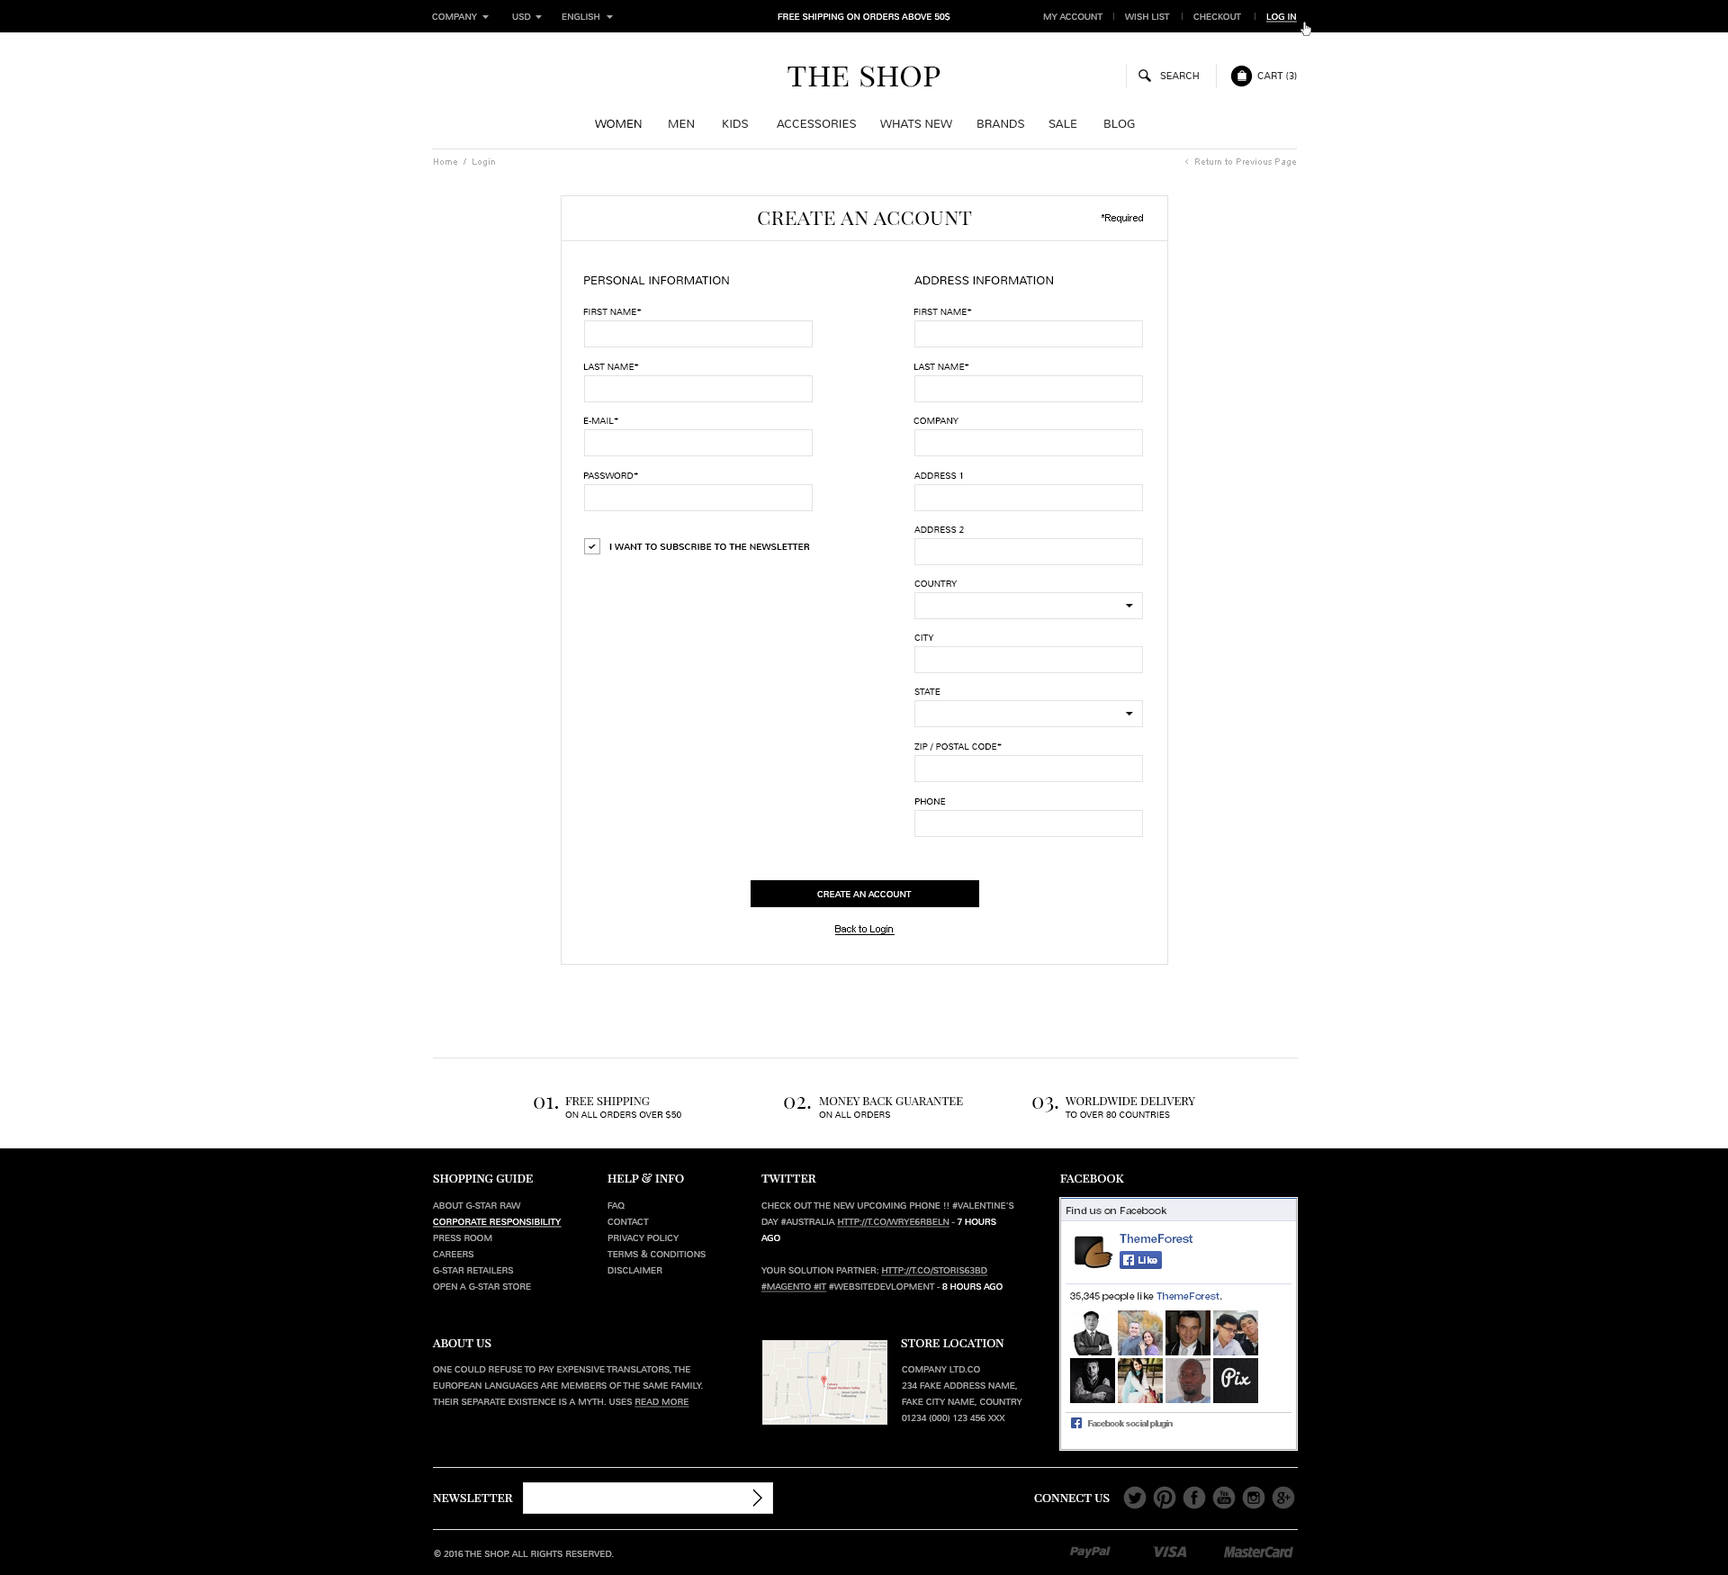
<style>
.page{position:relative;width:1728px;height:1575px;background:#ffffff}
.page>*{position:absolute;margin:0}
.t1{font:9px "Nunito-Light";color:#aaaaaa;text-transform:uppercase}
.t2{font:9px "Nunito-Light";color:#ffffff;text-transform:uppercase}
.t3{font:9px "Nunito-Light";color:#ffffff;text-transform:uppercase;text-decoration:underline}
.t4{font:32.4px "PlayfairDisplaySC-Regular";color:#000000}
.t5{font:9.9px "Nunito-Light";color:#282828;text-transform:uppercase}
.t6{font:11.7px "Nunito-Light";color:#000000;text-transform:uppercase}
.t7{font:11.7px "Nunito-Light";color:#282828;text-transform:uppercase}
.t8{font:9px "ArialMT";color:#aaaaaa}
.t9{font:10.8px "Cabin-Regular";color:#aaaaaa}
.t10{font:21.6px "PlayfairDisplaySC-Regular";color:#000000}
.t11{font:9.9px "ArialMT";color:#000000}
.t12{font:9px "Nunito-Light";color:#000000;text-transform:uppercase}
.t13{font:9px "Nunito-Regular";color:#000000;text-transform:uppercase}
.t14{font:9.9px "ArialMT";color:#000000;text-decoration:underline}
.t15{font:11.7px "PlayfairDisplaySC-Regular";color:#000000;text-transform:uppercase}
.t16{font:12.6px "PlayfairDisplaySC-Regular";color:#ffffff}
.t17{font:9px/16.2px "Nunito-Light";color:#aaaaaa;text-transform:uppercase}
.t18{font:9px/16.2px "Nunito-Light";color:#ffffff;text-transform:uppercase;text-decoration:underline}
.t19{font:9px/16.2px "Nunito-Light";color:#aaaaaa;text-transform:uppercase;text-decoration:underline}
.t20{font:9px/16.2px "Nunito-Light";color:#ffffff;text-transform:uppercase}
</style>
<div class="page">
<p class="t1" style="left:432px;top:14px;width:45px;height:6px">company</p>
<p class="t1" style="left:512px;top:14px;width:19px;height:6px">usD</p>
<p class="t1" style="left:562px;top:14px;width:37px;height:6px">English</p>
<p class="t2" style="left:778px;top:13px;width:172px;height:8px">free shipping on orders above 50$</p>
<p class="t1" style="left:1043px;top:14px;width:60px;height:6px">my account</p>
<p class="t1" style="left:1125px;top:14px;width:45px;height:6px">wish list</p>
<p class="t1" style="left:1193px;top:14px;width:48px;height:6px">Checkout</p>
<p class="t3" style="left:1266px;top:14px;width:31px;height:8px">log in</p>
<p class="t4" style="left:788px;top:66px;width:152px;height:21px">the shop</p>
<p class="t5" style="left:1160px;top:72px;width:39px;height:7px">search</p>
<p class="t5" style="left:1257px;top:72px;width:40px;height:8px">Cart (3)</p>
<p class="t6" style="left:595px;top:120px;width:47px;height:8px">women</p>
<p class="t7" style="left:669px;top:120px;width:25px;height:8px">men</p>
<p class="t7" style="left:723px;top:120px;width:25px;height:8px">kids</p>
<p class="t7" style="left:777px;top:120px;width:79px;height:8px">accessories</p>
<p class="t7" style="left:880px;top:120px;width:72px;height:8px">whats new</p>
<p class="t7" style="left:977px;top:120px;width:47px;height:8px">brands</p>
<p class="t7" style="left:1048px;top:120px;width:29px;height:8px">sale</p>
<p class="t7" style="left:1104px;top:120px;width:31px;height:8px">blog</p>
<p class="t8" style="left:434px;top:158px;width:61px;height:8px">Home  /  Login</p>
<p class="t9" style="left:1185px;top:159px;width:3px;height:5px">&lt;</p>
<p class="t8" style="left:1195px;top:158px;width:101px;height:8px">Return to Previous Page</p>
<p class="t10" style="left:758px;top:212px;width:214px;height:13px">create an account</p>
<p class="t11" style="left:1102px;top:214px;width:41px;height:9px">*Required</p>
<p class="t6" style="left:584px;top:276px;width:145px;height:8px">personal information</p>
<p class="t6" style="left:914px;top:276px;width:139px;height:8px">address information</p>
<p class="t12" style="left:583px;top:309px;width:59px;height:6px">first name*</p>
<p class="t12" style="left:914px;top:309px;width:58px;height:6px">first name*</p>
<p class="t12" style="left:583px;top:364px;width:56px;height:6px">last name*</p>
<p class="t12" style="left:914px;top:364px;width:55px;height:6px">last name*</p>
<p class="t12" style="left:583px;top:418px;width:35px;height:6px">e-mail*</p>
<p class="t12" style="left:914px;top:418px;width:44px;height:6px">company</p>
<p class="t12" style="left:583px;top:472px;width:55px;height:7px">password*</p>
<p class="t12" style="left:914px;top:472px;width:49px;height:7px">Address 1</p>
<p class="t12" style="left:914px;top:526px;width:50px;height:7px">address 2</p>
<p class="t13" style="left:609px;top:544px;width:201px;height:6px">I want to subscribe to the newsletter</p>
<p class="t12" style="left:914px;top:580px;width:43px;height:7px">country</p>
<p class="t12" style="left:914px;top:634px;width:20px;height:7px">city</p>
<p class="t12" style="left:914px;top:688px;width:26px;height:7px">state</p>
<p class="t12" style="left:914px;top:743px;width:88px;height:8px">zip / postal code*</p>
<p class="t12" style="left:914px;top:798px;width:32px;height:7px">Phone</p>
<p class="t2" style="left:817px;top:891px;width:95px;height:6px">create an account</p>
<p class="t14" style="left:835px;top:925px;width:60px;height:10px">Back to Login</p>
<p class="t10" style="left:534px;top:1097px;width:24px;height:12px">01.</p>
<p class="t15" style="left:565px;top:1097px;width:85px;height:8px">Free Shipping</p>
<p class="t10" style="left:784px;top:1097px;width:27px;height:12px">02.</p>
<p class="t15" style="left:819px;top:1097px;width:144px;height:8px">Money back guarantee</p>
<p class="t10" style="left:1032px;top:1097px;width:26px;height:15px">03.</p>
<p class="t15" style="left:1065px;top:1097px;width:130px;height:8px">Worldwide Delivery</p>
<p class="t12" style="left:565px;top:1111px;width:116px;height:8px">On all orders over $50</p>
<p class="t12" style="left:819px;top:1112px;width:72px;height:6px">On all orders</p>
<p class="t12" style="left:1066px;top:1112px;width:104px;height:6px">To over 80 countries</p>
<p class="t16" style="left:433px;top:1174px;width:100px;height:9px">shopping guide</p>
<p class="t16" style="left:608px;top:1174px;width:76px;height:9px">help &amp; info</p>
<p class="t16" style="left:761px;top:1174px;width:55px;height:9px">twitter</p>
<p class="t16" style="left:1060px;top:1174px;width:64px;height:9px">facebook</p>
<p class="t17" style="left:433px;top:1202px;width:129px;height:88px">About G-Star Raw<br><span class="t18">Corporate Responsibility<br></span>Press Room<br>Careers<br>G-Star Retailers<br>Open a G-Star Store</p>
<p class="t17" style="left:608px;top:1202px;width:98px;height:72px">FAQ<br>Contact<br>Privacy Policy<br>Terms &amp; Conditions<br>Disclaimer</p>
<p class="t17" style="left:761px;top:1202px;width:253px;height:90px">check out the new upcoming phone !! #Valentine's Day #Australia <span class="t19">http://t.co/wRye6rBElN</span> - <span class="t20">7 hours ago<br></span><br>your solution partner: <span class="t19">http://t.co/StOrIs63bd #magento #IT</span> #websitedevlopment - <span class="t20">8 hours ago</span></p>
<p class="t16" style="left:432px;top:1339px;width:59px;height:8px">about us</p>
<p class="t16" style="left:901px;top:1339px;width:103px;height:8px">store location</p>
<p class="t17" style="left:433px;top:1366px;width:270px;height:42px">One could refuse to pay expensive translators, the European languages are members of the same family. Their separate existence is a myth. Uses <span class="t19">read more</span></p>
<p class="t17" style="left:902px;top:1366px;width:120px;height:56px">Company ltd.co<br>234 Fake address name,<br>Fake city name, Country<br>01234 (000) 123 456 xxx</p>
<p class="t16" style="left:433px;top:1494px;width:80px;height:8px">newsletter</p>
<p class="t16" style="left:1034px;top:1494px;width:76px;height:8px">connect us</p>
<p class="t1" style="left:434px;top:1550px;width:180px;height:7px">© 2016 the shop. All Rights Reserved.</p>
</div>
